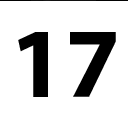
<style>
.page{position:relative;width:128px;height:128px;background:#ffffff}
.page>*{position:absolute;margin:0}
.t1{font:99.7px "MyriadHebrew-Bold";color:#000000}
</style>
<div class="page">
<p class="t1" style="left:18px;top:31px;width:98px;height:65px">17</p>
</div>
